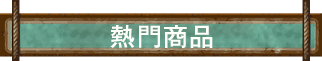
<style>
.page{position:relative;width:322px;height:61px;background:#ffffff}
.page>*{position:absolute;margin:0}
.t1{font:25px "GothicMB101Pr6N-Medium";letter-spacing:0.075em;color:#fffffa}
</style>
<div class="page">
<p class="t1" style="left:110px;top:24px;width:103px;height:24px">熱門商品</p>
</div>
